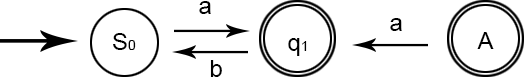
<style>
.page{position:relative;width:524px;height:77px;background:#ffffff}
.page>*{position:absolute;margin:0}
.t1{font:24px "ArialMT";color:#000000}
.t2{font:14px "ArialMT";color:#000000}
</style>
<div class="page">
<p class="t1" style="left:199px;top:1px;width:12px;height:13px">a</p>
<p class="t1" style="left:390px;top:18px;width:12px;height:13px">a</p>
<p class="t1" style="left:113px;top:33px;width:23px;height:17px">S<span class="t2">0</span></p>
<p class="t1" style="left:288px;top:38px;width:19px;height:18px">q<span class="t2">1</span></p>
<p class="t1" style="left:477px;top:32px;width:17px;height:17px">A</p>
<p class="t1" style="left:210px;top:60px;width:12px;height:17px">b</p>
</div>
